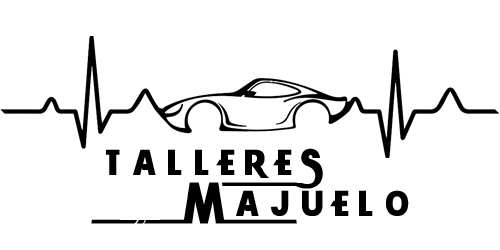
<style>
.page{position:relative;width:500px;height:250px;background:#ffffff}
.page>*{position:absolute;margin:0}
.t1{font:63px "WRESTLEMANIA";letter-spacing:0.2em;color:#000000}
.t2{font:63.1px "WRESTLEMANIA";letter-spacing:0.2em;color:#000000}
</style>
<div class="page">
<p class="t1" style="left:106px;top:148px;width:217px;height:41px">TALLERES</p>
<p class="t2" style="left:91px;top:182px;width:318px;height:42px">MAJUELO</p>
</div>
